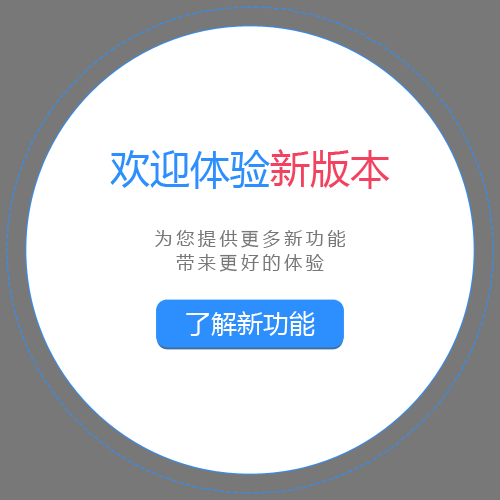
<style>
.page{position:relative;width:500px;height:500px;background:#ffffff}
.page>*{position:absolute;margin:0}
.t1{font:40px "MicrosoftYaHei";color:#2c8ffd}
.t2{font:40px "MicrosoftYaHei";color:#f2425f}
.t3{font:18px/12px "MicrosoftYaHei";letter-spacing:0.2em;color:#777777}
.t4{font:26px "MicrosoftYaHei";color:#ffffff}
</style>
<div class="page">
<p class="t1" style="left:110px;top:149px;width:280px;height:40px">欢迎体验<span class="t2">新版本</span></p>
<p class="t3" style="left:155px;top:230px;width:190px;height:42px;text-align:center">为您提供更多新功能<br><br>带来更好的体验</p>
<p class="t4" style="left:186px;top:311px;width:129px;height:25px">了解新功能</p>
</div>
